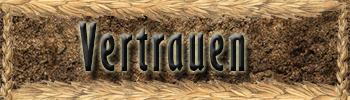
<style>
.page{position:relative;width:350px;height:100px}
.page>*{position:absolute;margin:0}
.t1{font:60px "GillSansMT-ExtraCondensedBold";letter-spacing:0.07em}
</style>
<div class="page">
<p class="t1" style="left:79px;top:23px;width:166px;height:48px">Vertrauen</p>
</div>
